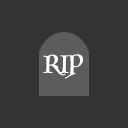
<style>
.page{position:relative;width:128px;height:128px;background:#333333}
.page>*{position:absolute;margin:0}
.t1{font:24px "Luminari-Regular";color:#ffffff;scale:0.91 1}
</style>
<div class="page">
<p class="t1" style="left:43px;top:54px;width:40px;height:25px">RIP</p>
</div>
